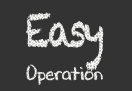
<style>
.page{position:relative;width:132px;height:91px;background:#333333}
.page>*{position:absolute;margin:0}
.t1{font:20px/56px "DJBChalkItUp"}
.t2{font:46px/56px "Chalkduster";letter-spacing:-0.08em;scale:0.75 1}
</style>
<div class="page">
<p class="t1" style="left:26px;top:12px;width:78px;height:73px;text-align:center"><span class="t2">Easy<br></span>Operation</p>
</div>
